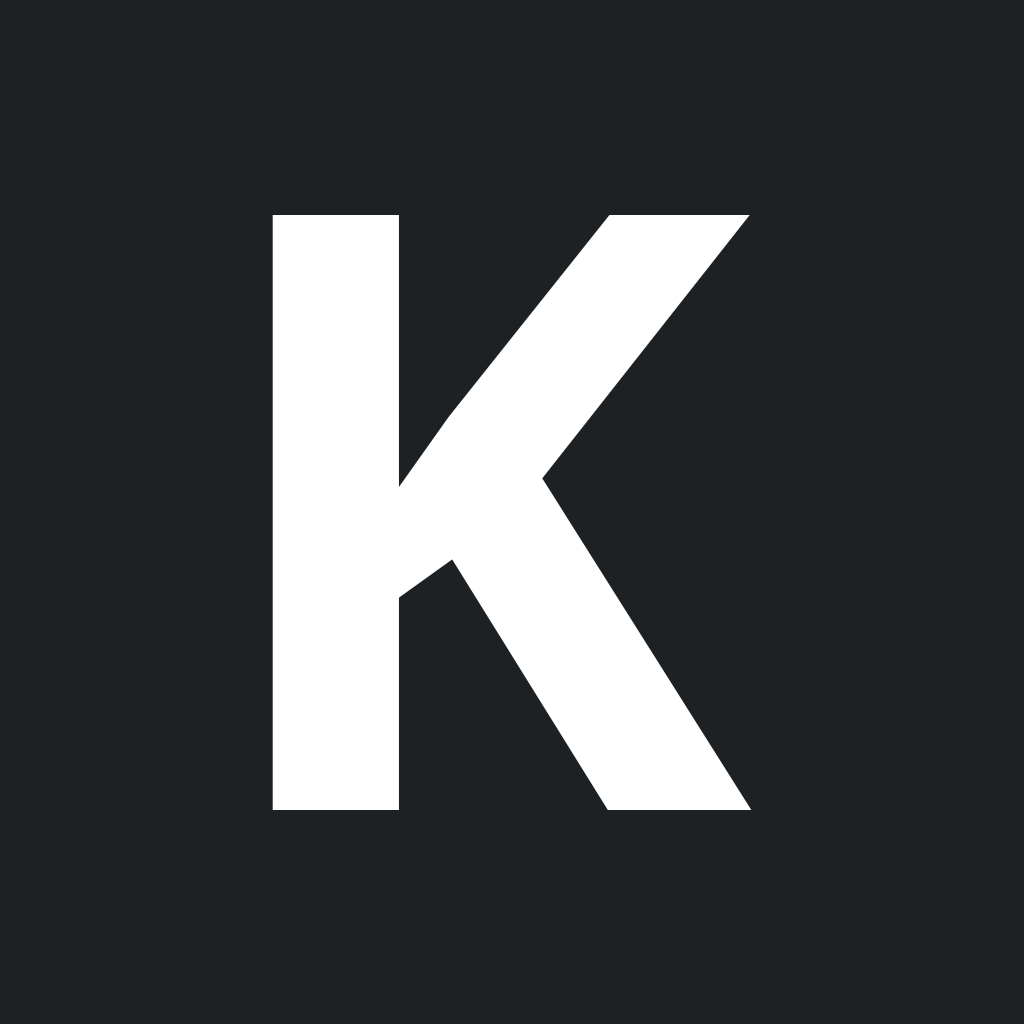
<style>
.page{position:relative;width:1024px;height:1024px;background:#1e2124}
.page>*{position:absolute;margin:0}
.t1{font:833.3px "OpenSans-Bold";letter-spacing:0.025em;color:#ffffff}
</style>
<div class="page">
<p class="t1" style="left:272px;top:215px;width:480px;height:595px">K</p>
</div>
